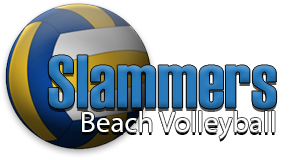
<style>
.page{position:relative;width:299px;height:160px;background:#ffffff}
.page>*{position:absolute;margin:0}
.t1{font:75px "Haettenschweiler";color:#2879bb}
.t2{font:29.2px "MyriadPro-Regular";color:#ffffff}
</style>
<div class="page">
<p class="t1" style="left:48px;top:55px;width:229px;height:54px">Slammers</p>
<p class="t2" style="left:82px;top:111px;width:193px;height:28px">Beach Volleyball</p>
</div>
